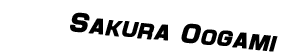
<style>
.page{position:relative;width:283px;height:56px;background:#ffffff}
.page>*{position:absolute;margin:0}
.t1{font:28px "Maximus";color:#000000;font-weight:bold;font-style:italic}
</style>
<div class="page">
<p class="t1" style="left:70px;top:12px;width:208px;height:40px;rotate:6deg">Sakura Oogami</p>
</div>
